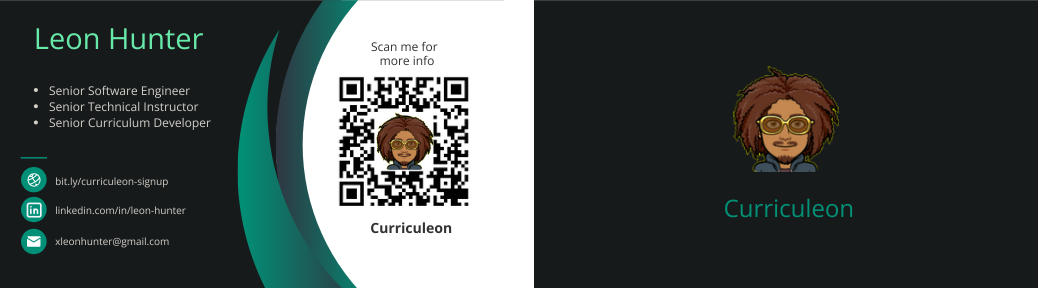
<style>
.page{position:relative;width:1038px;height:288px;background:#171a1b}
.page>*{position:absolute;margin:0}
.t1{font:29px "OpenSans-Regular";color:#67eaa9}
.t2{font:12px "OpenSans-Regular";color:#333132}
.t3{font:12px/14.2px "OpenSans-Regular";color:#333132}
.t4{font:12px/16.2px "OpenSans-Regular";color:#d2cfc9}
.t5{font:12px/14.2px "OpenSans-Regular";color:#d2cfc9}
.t6{font:10px "OpenSans-Regular";color:#d2cfc9}
.t7{font:24px "OpenSans-Regular";color:#009177}
.t8{font:10px "OpenSans-Regular"}
.t9{font:14px "OpenSans-Bold";color:#333132}
</style>
<div class="page">
<p class="t1" style="left:36px;top:28px;width:167px;height:22px">Leon Hunter</p>
<p class="t2" style="left:371px;top:41px;width:67px;height:25px">Scan me for<span class="t3"><br>more info</span></p>
<p class="t4" style="left:49px;top:85px;width:162px;height:45px"><span class="t5">Senior Software Engineer</span><br>Senior Technical Instructor<br>Senior Curriculum Developer</p>
<p class="t6" style="left:56px;top:177px;width:112px;height:11px">bit.ly/curriculeon-signup</p>
<p class="t7" style="left:725px;top:198px;width:128px;height:20px">Curriculeon</p>
<p class="t8" style="left:56px;top:206px;width:130px;height:9px">linkedin.com/in/leon-hunter</p>
<p class="t9" style="left:371px;top:222px;width:81px;height:12px">Curriculeon</p>
<p class="t8" style="left:55px;top:237px;width:114px;height:11px">xleonhunter@gmail.com</p>
</div>
